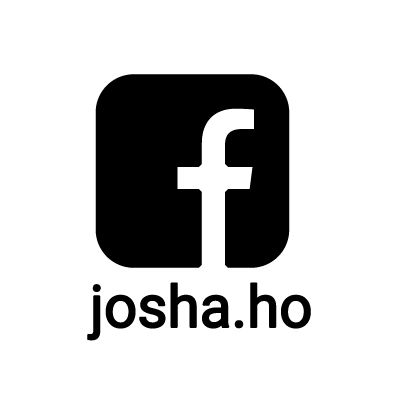
<style>
.page{position:relative;width:400px;height:400px;background:#ffffff}
.page>*{position:absolute;margin:0}
.t1{font:100px "Roboto-Regular";letter-spacing:-0.025em;color:#000000;font-weight:bold}
</style>
<div class="page">
<p class="t1" style="left:87px;top:282px;width:224px;height:59px">josha.ho</p>
</div>
